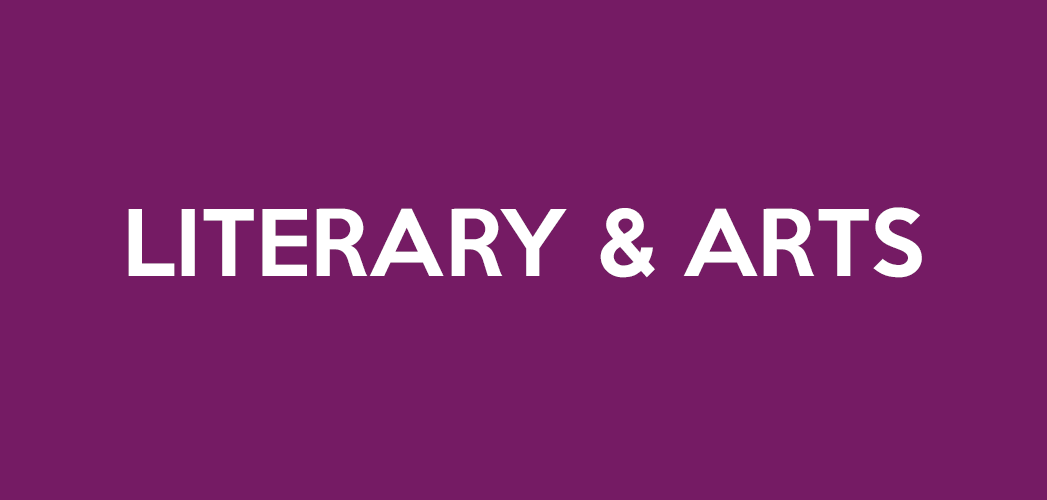
<style>
.page{position:relative;width:1047px;height:500px;background:#751b64}
.page>*{position:absolute;margin:0}
.t1{font:84px "KeepCalm-Medium";color:#ffffff}
</style>
<div class="page">
<p class="t1" style="left:128px;top:207px;width:794px;height:71px">LITERARY &amp; ARTS</p>
</div>
